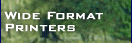
<style>
.page{position:relative;width:132px;height:43px}
.page>*{position:absolute;margin:0}
.t1{font:14px/12px "BankGothicBT-Medium";color:#ffffff;font-weight:bold}
</style>
<div class="page">
<p class="t1" style="left:4px;top:11px;width:99px;height:21px">Wide Format<br>Printers</p>
</div>
